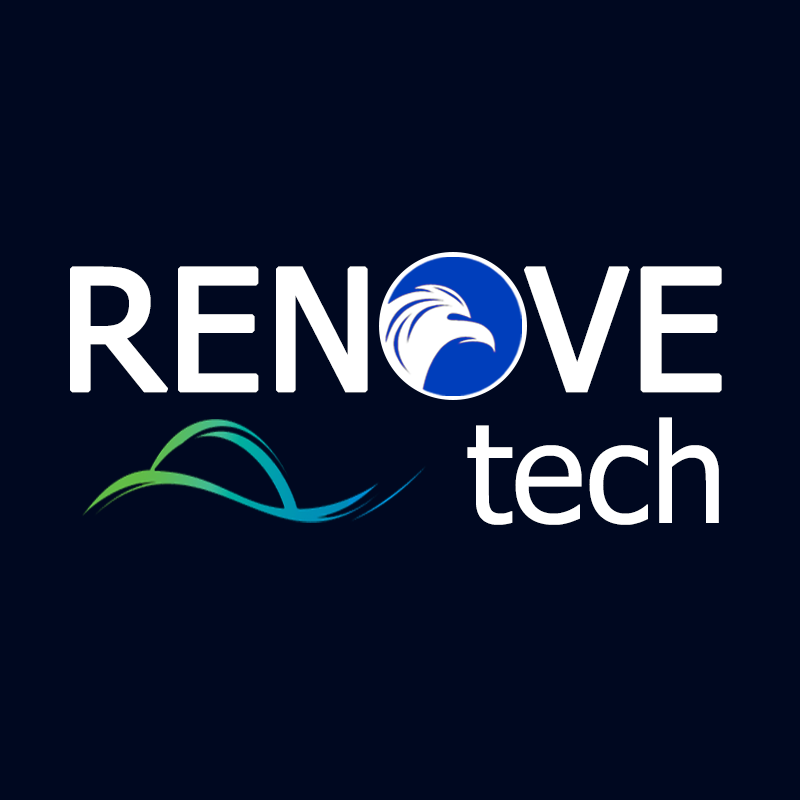
<style>
.page{position:relative;width:800px;height:800px;background:#000820}
.page>*{position:absolute;margin:0}
.t1{font:166.4px "Tahoma";color:#ffffff;font-weight:bold}
.t2{font:138.7px "Tahoma";color:#ffffff}
</style>
<div class="page">
<p class="t1" style="left:70px;top:266px;width:298px;height:127px">REN</p>
<p class="t1" style="left:524px;top:266px;width:198px;height:127px">VE</p>
<p class="t2" style="left:467px;top:417px;width:252px;height:108px">tech</p>
</div>
